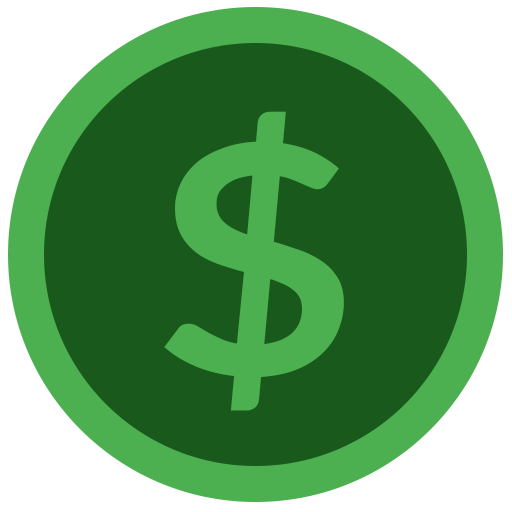
<style>
.page{position:relative;width:512px;height:512px;background:#19591c}
.page>*{position:absolute;margin:0}
.t1{font:318.3px "Aleo-Bold";letter-spacing:-0.02em;color:#4caf50;scale:1.11 1}
</style>
<div class="page">
<p class="t1" style="left:164px;top:111px;width:180px;height:300px">$</p>
</div>
